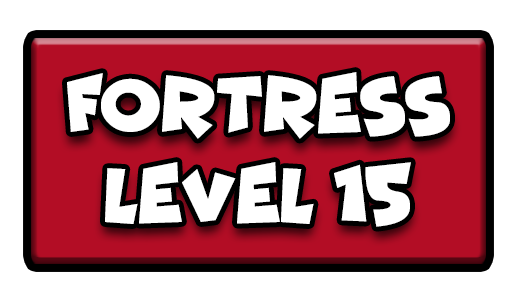
<style>
.page{position:relative;width:517px;height:301px;background:#ffffff}
.page>*{position:absolute;margin:0}
.t1{font:77.7px "Funhouse";color:#ffffff;scale:0.95 1}
</style>
<div class="page">
<p class="t1" style="left:67px;top:72px;width:383px;height:67px">FORTRESS</p>
<p class="t1" style="left:105px;top:162px;width:306px;height:65px">LEVEL 15</p>
</div>
